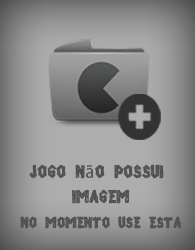
<style>
.page{position:relative;width:195px;height:250px}
.page>*{position:absolute;margin:0}
.t1{font:16.7px/25px "AlphaWood";letter-spacing:0.01em;color:#515253}
.t2{font:19.4px/25px "AlphaWood";letter-spacing:0.01em;color:#515253}
.t3{font:19.4px/25px "MyriadPro-Regular";letter-spacing:0.01em;color:#515253}
</style>
<div class="page">
<p class="t1" style="left:20px;top:164px;width:162px;height:65px;text-align:center"><span class="t2">jogo n</span><span class="t3">ã</span><span class="t2">o possui <br>imagem<br></span>no momento use esta</p>
</div>
